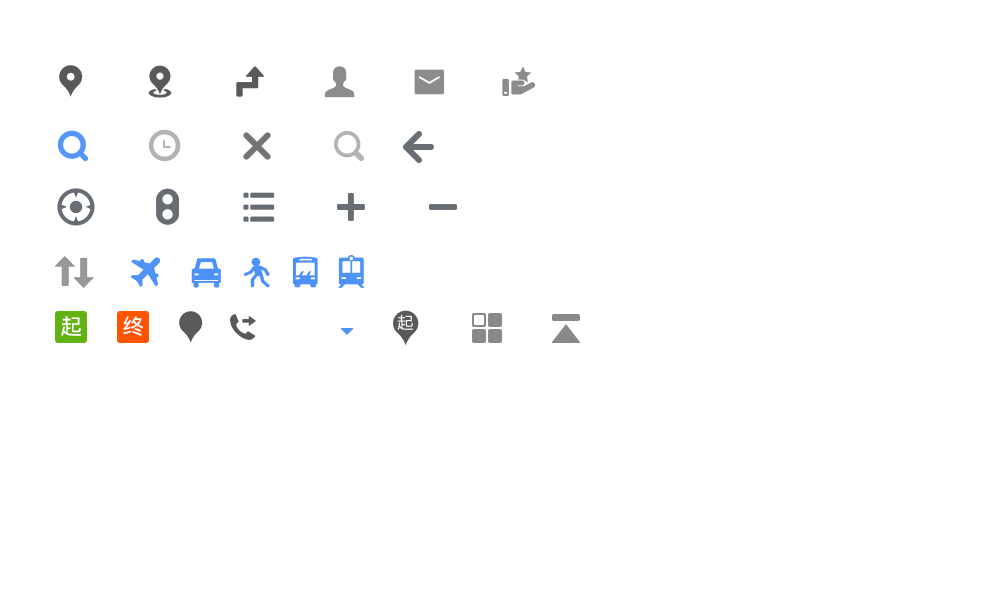
<style>
.page{position:relative;width:1000px;height:600px;background:#ffffff}
.page>*{position:absolute;margin:0}
.t1{font:22.1px "DroidSansFallback";letter-spacing:-0.04em;color:#ffffff}
</style>
<div class="page">
<p class="t1" style="left:61px;top:316px;width:21px;height:20px">起</p>
<p class="t1" style="left:123px;top:316px;width:21px;height:20px">终</p>
</div>
